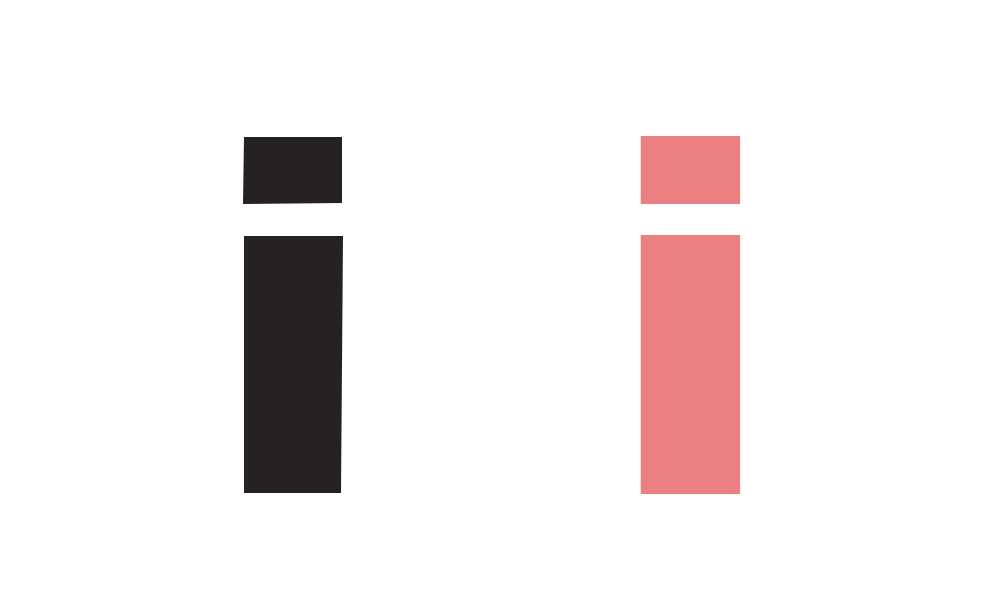
<style>
.page{position:relative;width:1000px;height:600px;background:#ffffff}
.page>*{position:absolute;margin:0}
.t1{font:500px "Arial-Black";color:#ec7f7f}
</style>
<div class="page">
<p class="t1" style="left:640px;top:136px;width:101px;height:358px">i</p>
</div>
